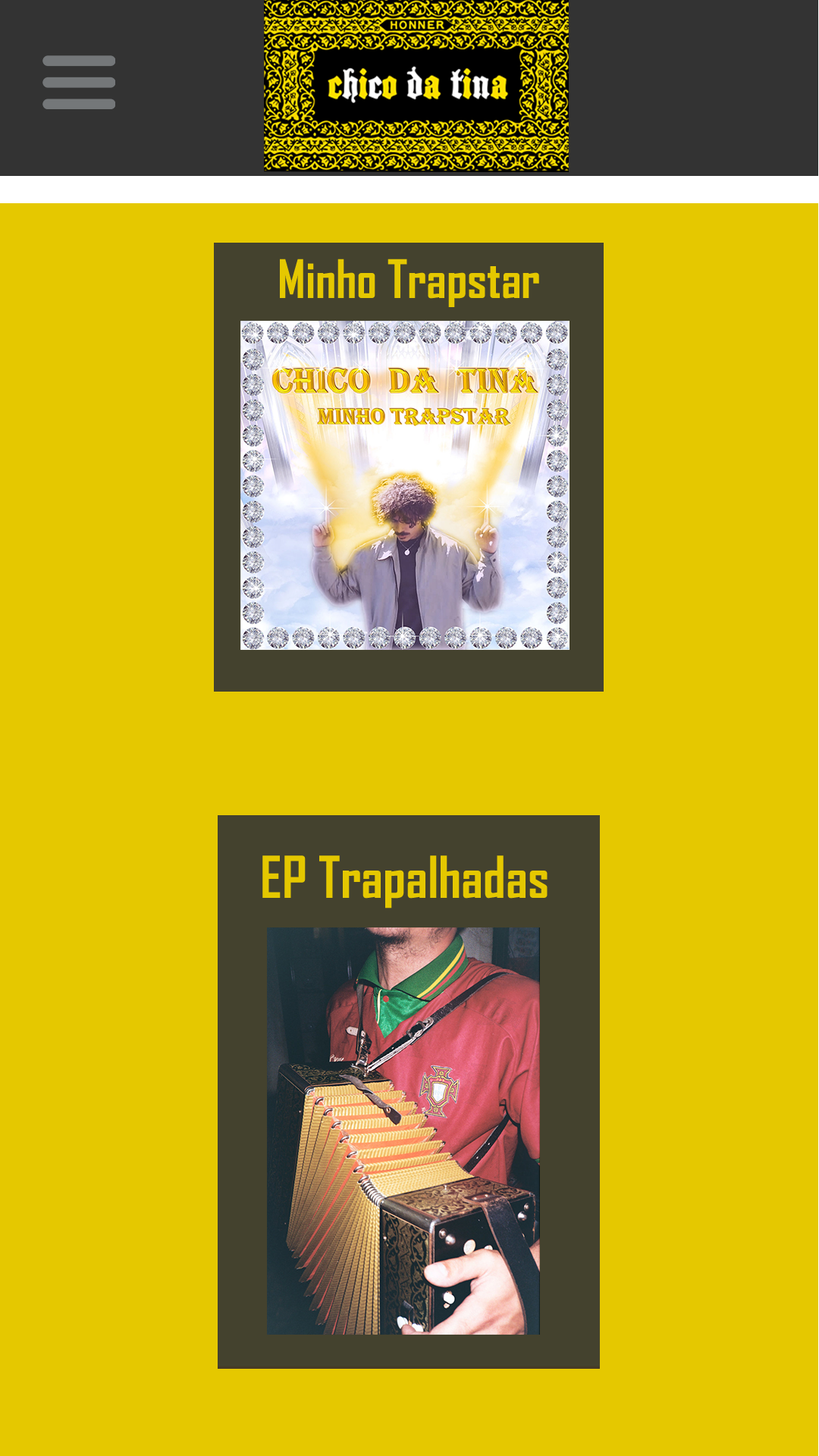
<style>
.page{position:relative;width:819px;height:1456px;background:#e5c800}
.page>*{position:absolute;margin:0}
.t1{font:50.7px "AgencyFB-Bold";color:#e5c800}
.t2{font:55.4px "AgencyFB-Bold";color:#e5c800}
</style>
<div class="page">
<p class="t1" style="left:280px;top:259px;width:259px;height:48px">Minho Trapstar</p>
<p class="t2" style="left:262px;top:855px;width:286px;height:53px">EP Trapalhadas</p>
</div>
